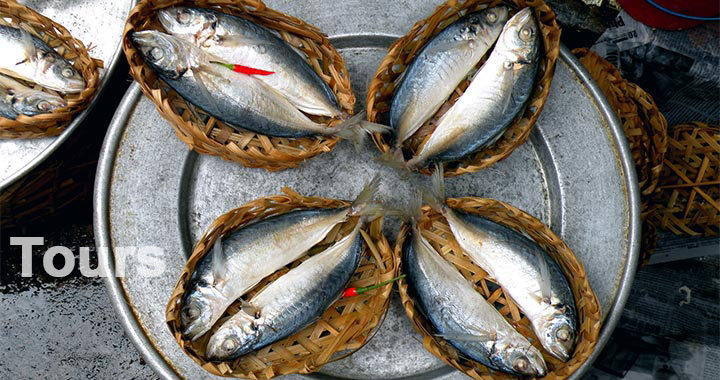
<style>
.page{position:relative;width:720px;height:380px}
.page>*{position:absolute;margin:0}
.t1{font:54px "Arial-BoldMT";font-weight:bold;scale:1.03 1}
</style>
<div class="page">
<p class="t1" style="left:10px;top:237px;width:155px;height:40px">Tours</p>
</div>
